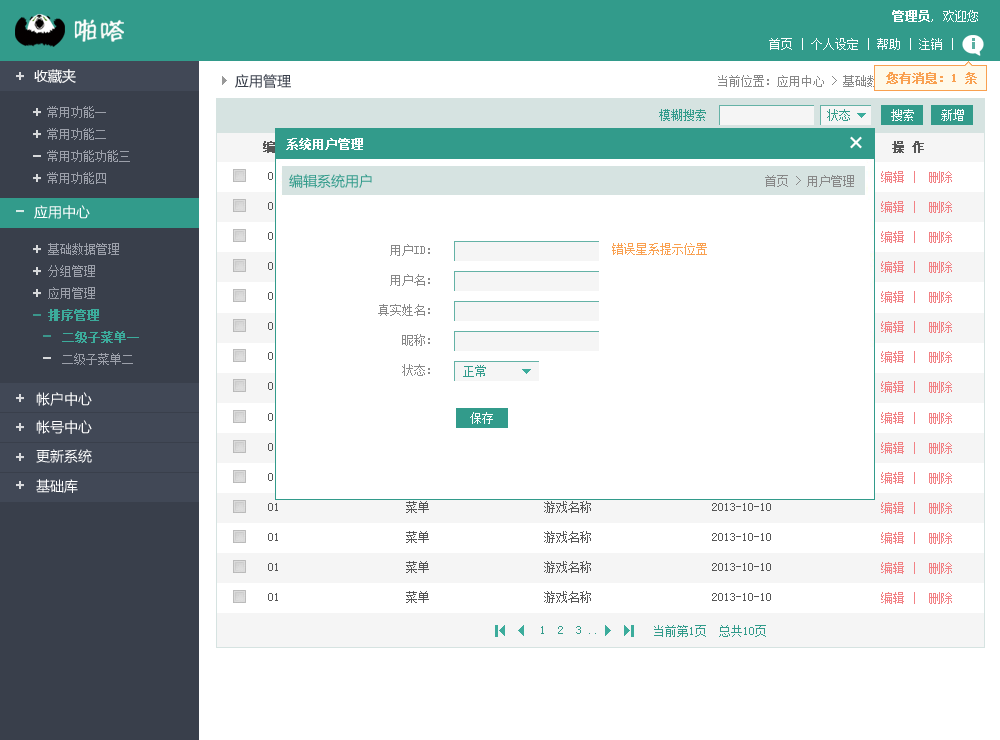
<style>
.page{position:relative;width:1000px;height:740px;background:#ffffff}
.page>*{position:absolute;margin:0}
.t1{font:12px/28px "SimSun";color:#ffffff}
.t2{font:12px/28px "SimSun";color:#ffffff;font-weight:bold}
.t3{font:14px "MicrosoftYaHei";color:#ffffff}
.t4{font:14px "MicrosoftYaHei";color:#393f4b}
.t5{font:12px "SimSun"}
.t6{font:12px "SimSun";color:#f9a050;font-weight:bold}
.t7{font:12px/22px "SimSun";color:#9ca0aa}
.t8{font:12px "SimSun";color:#329b8b}
.t9{font:12px "SimSun";color:#ffffff}
.t10{font:12px "SimSun";color:#ffffff;font-weight:bold}
.t11{font:14px "MicrosoftYaHei";color:#329b8b}
.t12{font:12px "SimSun";color:#f28185}
.t13{font:12px "SimSun";color:#888888}
.t14{font:12px/22px "SimSun";color:#3cac9c;font-weight:bold}
.t15{font:12px/30px "SimSun";color:#888888}
.t16{font:12px "SimSun";color:#f9a050}
.t17{font:12px "SimSun";color:#555555}
</style>
<div class="page">
<p class="t1" style="left:769px;top:10px;width:209px;height:40px;text-align:right"><span class="t2">管理员</span>, 欢迎您<br>首页 | 个人设定 | 帮助 | 注销 |</p>
<p class="t3" style="left:34px;top:69px;width:42px;height:15px">收藏夹</p>
<p class="t4" style="left:235px;top:74px;width:56px;height:14px">应用管理</p>
<p class="t5" style="left:718px;top:75px;width:262px;height:12px">当前位置：应用中心 &gt; 基础数据管理 &gt; 二级菜单</p>
<p class="t6" style="left:886px;top:72px;width:91px;height:12px">您有消息：1 条</p>
<p class="t7" style="left:47px;top:106px;width:83px;height:78px">常用功能一<br>常用功能二<br>常用功能功能三<br>常用功能四</p>
<p class="t8" style="left:659px;top:109px;width:47px;height:12px">模糊搜索</p>
<p class="t8" style="left:827px;top:109px;width:23px;height:12px">状态</p>
<p class="t9" style="left:891px;top:109px;width:23px;height:12px">搜索</p>
<p class="t9" style="left:941px;top:109px;width:23px;height:12px">新增</p>
<p class="t10" style="left:286px;top:138px;width:77px;height:12px">系统用户管理</p>
<p class="t11" style="left:289px;top:174px;width:83px;height:14px">编辑系统用户</p>
<p class="t12" style="left:881px;top:171px;width:71px;height:12px">编辑 |  删除</p>
<p class="t13" style="left:765px;top:175px;width:89px;height:12px">首页 &gt; 用户管理</p>
<p class="t3" style="left:34px;top:205px;width:56px;height:14px">应用中心</p>
<p class="t12" style="left:881px;top:201px;width:71px;height:12px">编辑 |  删除</p>
<p class="t12" style="left:881px;top:231px;width:71px;height:12px">编辑 |  删除</p>
<p class="t7" style="left:48px;top:243px;width:91px;height:122px">基础数据管理<br>分组管理<br>应用管理<br><span class="t14">排序管理<br>  二级子菜单一<br>  </span>二级子菜单二</p>
<p class="t15" style="left:378px;top:244px;width:52px;height:132px;text-align:right">用户ID：<br>用户名：<br>真实姓名：<br>昵称：<br>状态：</p>
<p class="t16" style="left:612px;top:243px;width:95px;height:12px">错误星系提示位置</p>
<p class="t12" style="left:881px;top:261px;width:71px;height:12px">编辑 |  删除</p>
<p class="t12" style="left:881px;top:291px;width:71px;height:12px">编辑 |  删除</p>
<p class="t12" style="left:881px;top:321px;width:71px;height:12px">编辑 |  删除</p>
<p class="t12" style="left:881px;top:351px;width:71px;height:12px">编辑 |  删除</p>
<p class="t8" style="left:463px;top:365px;width:23px;height:12px">正常</p>
<p class="t12" style="left:881px;top:381px;width:71px;height:12px">编辑 |  删除</p>
<p class="t3" style="left:36px;top:392px;width:56px;height:14px">帐户中心</p>
<p class="t9" style="left:470px;top:412px;width:23px;height:12px">保存</p>
<p class="t12" style="left:881px;top:412px;width:71px;height:12px">编辑 |  删除</p>
<p class="t3" style="left:36px;top:420px;width:56px;height:14px">帐号中心</p>
<p class="t3" style="left:36px;top:449px;width:56px;height:14px">更新系统</p>
<p class="t12" style="left:881px;top:442px;width:71px;height:12px">编辑 |  删除</p>
<p class="t12" style="left:881px;top:472px;width:71px;height:12px">编辑 |  删除</p>
<p class="t3" style="left:36px;top:479px;width:42px;height:14px">基础库</p>
<p class="t17" style="left:268px;top:501px;width:503px;height:12px">01                     菜单                   游戏名称                    2013-10-10</p>
<p class="t12" style="left:881px;top:502px;width:71px;height:12px">编辑 |  删除</p>
<p class="t17" style="left:268px;top:531px;width:503px;height:12px">01                     菜单                   游戏名称                    2013-10-10</p>
<p class="t12" style="left:881px;top:532px;width:71px;height:12px">编辑 |  删除</p>
<p class="t17" style="left:268px;top:561px;width:503px;height:12px">01                     菜单                   游戏名称                    2013-10-10</p>
<p class="t12" style="left:881px;top:562px;width:71px;height:12px">编辑 |  删除</p>
<p class="t17" style="left:268px;top:591px;width:503px;height:12px">01                     菜单                   游戏名称                    2013-10-10</p>
<p class="t12" style="left:881px;top:592px;width:71px;height:12px">编辑 |  删除</p>
<p class="t8" style="left:541px;top:626px;width:55px;height:8px">1  2  3 ..</p>
<p class="t8" style="left:654px;top:625px;width:112px;height:12px">当前第1页  总共10页</p>
</div>
